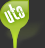
<style>
.page{position:relative;width:45px;height:48px;background:#333333}
.page>*{position:absolute;margin:0}
.t1{font:8px "Rockit";color:#ffffff}
</style>
<div class="page">
<p class="t1" style="left:4px;top:4px;width:21px;height:19px;rotate:-26deg">uto</p>
</div>
